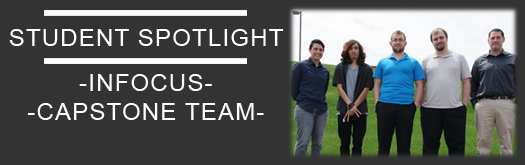
<style>
.page{position:relative;width:525px;height:165px;background:#333333}
.page>*{position:absolute;margin:0}
.t1{font:24.2px "ArialMT";letter-spacing:0.05em;color:#ffffff}
.t2{font:24.2px "ArialMT";letter-spacing:0.05em;color:#ffffff;text-transform:uppercase}
</style>
<div class="page">
<p class="t1" style="left:9px;top:29px;width:275px;height:17px">STUDENT SPOTLIGHT</p>
<p class="t2" style="left:27px;top:74px;width:237px;height:46px;text-align:center">-inFocus-<br>-Capstone Team-</p>
</div>
